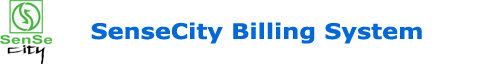
<style>
.page{position:relative;width:504px;height:64px;background:#ffffff}
.page>*{position:absolute;margin:0}
.t1{font:21.6px "Verdana-Bold";color:#0268d6;scale:1.11 1}
</style>
<div class="page">
<p class="t1" style="left:91px;top:22px;width:331px;height:22px">SenseCity Billing System</p>
</div>
